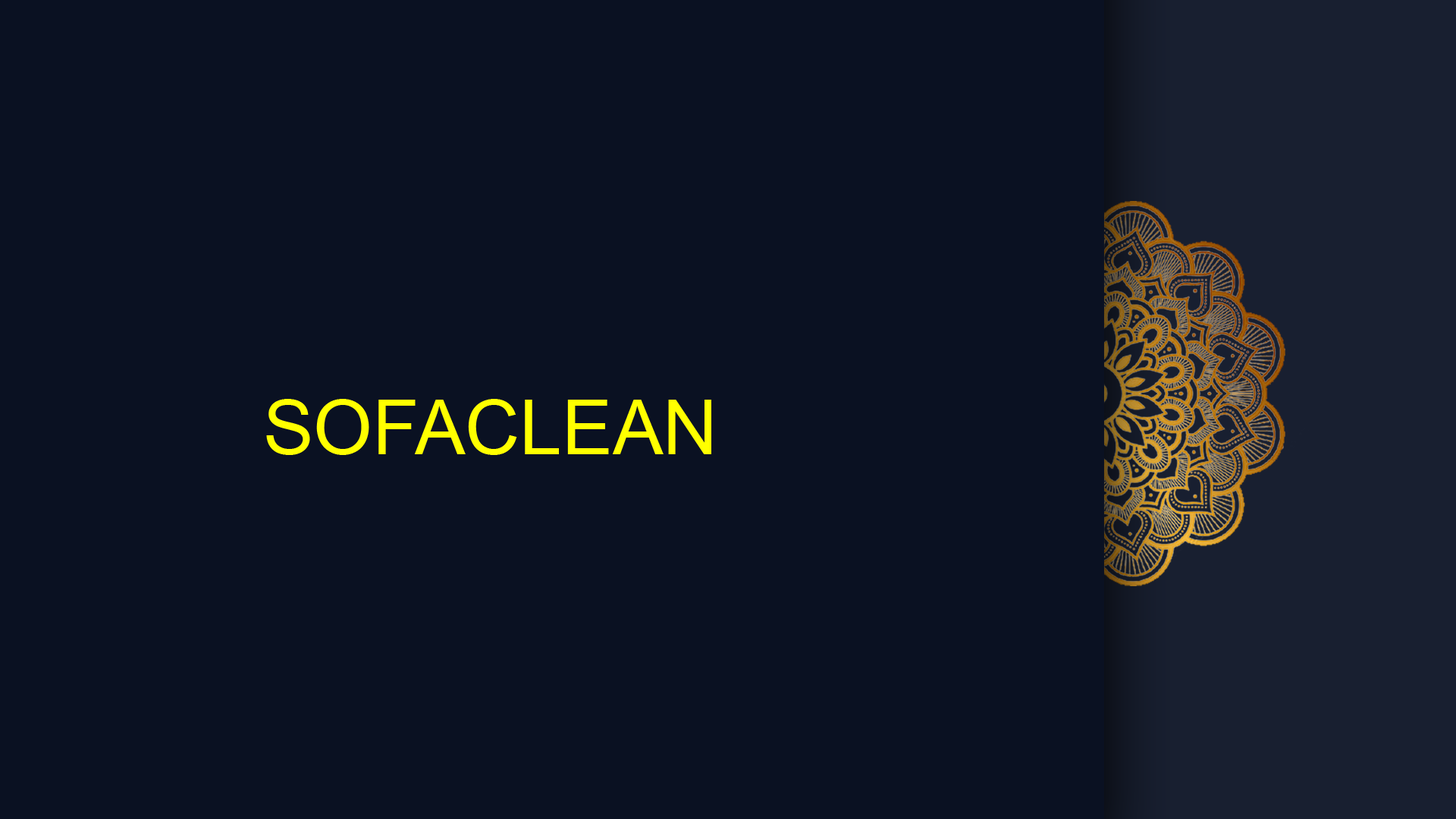
<style>
.page{position:relative;width:1456px;height:819px;background:#0a1122}
.page>*{position:absolute;margin:0}
.t1{font:75.8px "ArialMT";color:#ffff00}
</style>
<div class="page">
<p class="t1" style="left:266px;top:399px;width:445px;height:56px">SOFACLEAN</p>
</div>
